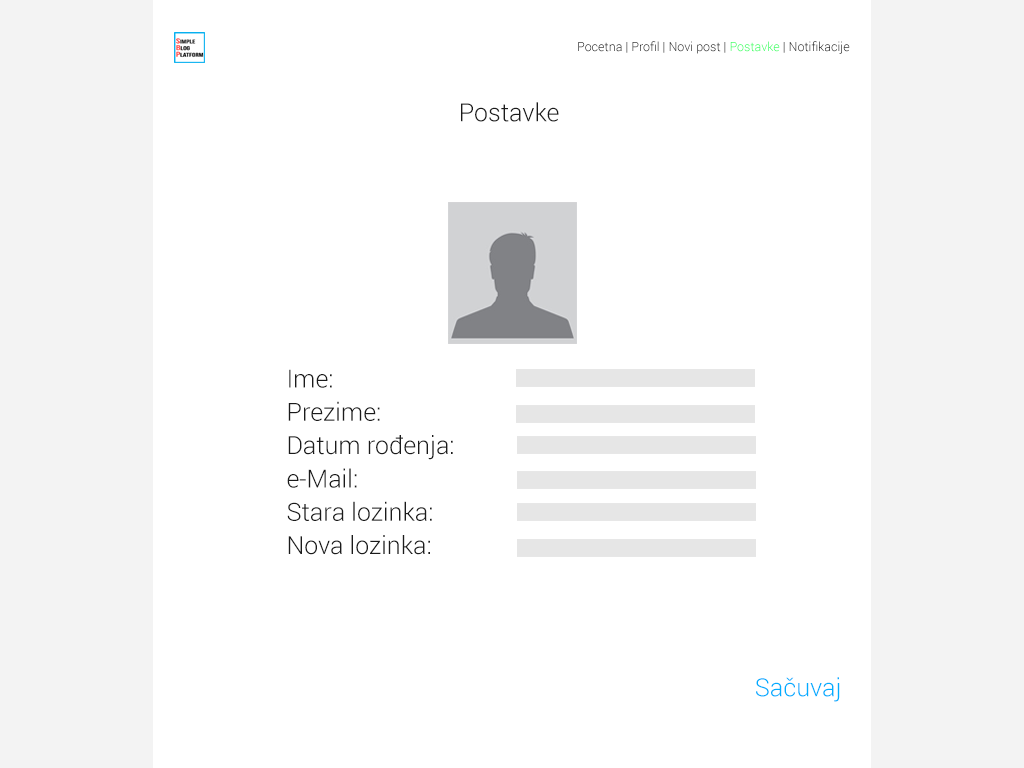
<style>
.page{position:relative;width:1024px;height:768px;background:#ffffff}
.page>*{position:absolute;margin:0}
.t1{font:12.5px "Roboto-Light"}
.t2{font:25px "Roboto-Light";color:#1b1b1b}
.t3{font:25px/33.3px "Roboto-Light";color:#1b1b1b}
.t4{font:25px "Roboto-Light";color:#00aeff}
</style>
<div class="page">
<p class="t1" style="left:578px;top:41px;width:272px;height:13px">Pocetna | Profil | Novi post | Postavke | Notifikacije</p>
<p class="t2" style="left:461px;top:102px;width:98px;height:20px">Postavke</p>
<p class="t3" style="left:287px;top:369px;width:166px;height:186px">Ime:      <br>Prezime:     <br>Datum rođenja:   <br>e-Mail: <br>Stara lozinka:<br>Nova lozinka:</p>
<p class="t4" style="left:756px;top:677px;width:84px;height:25px">Sačuvaj</p>
</div>
